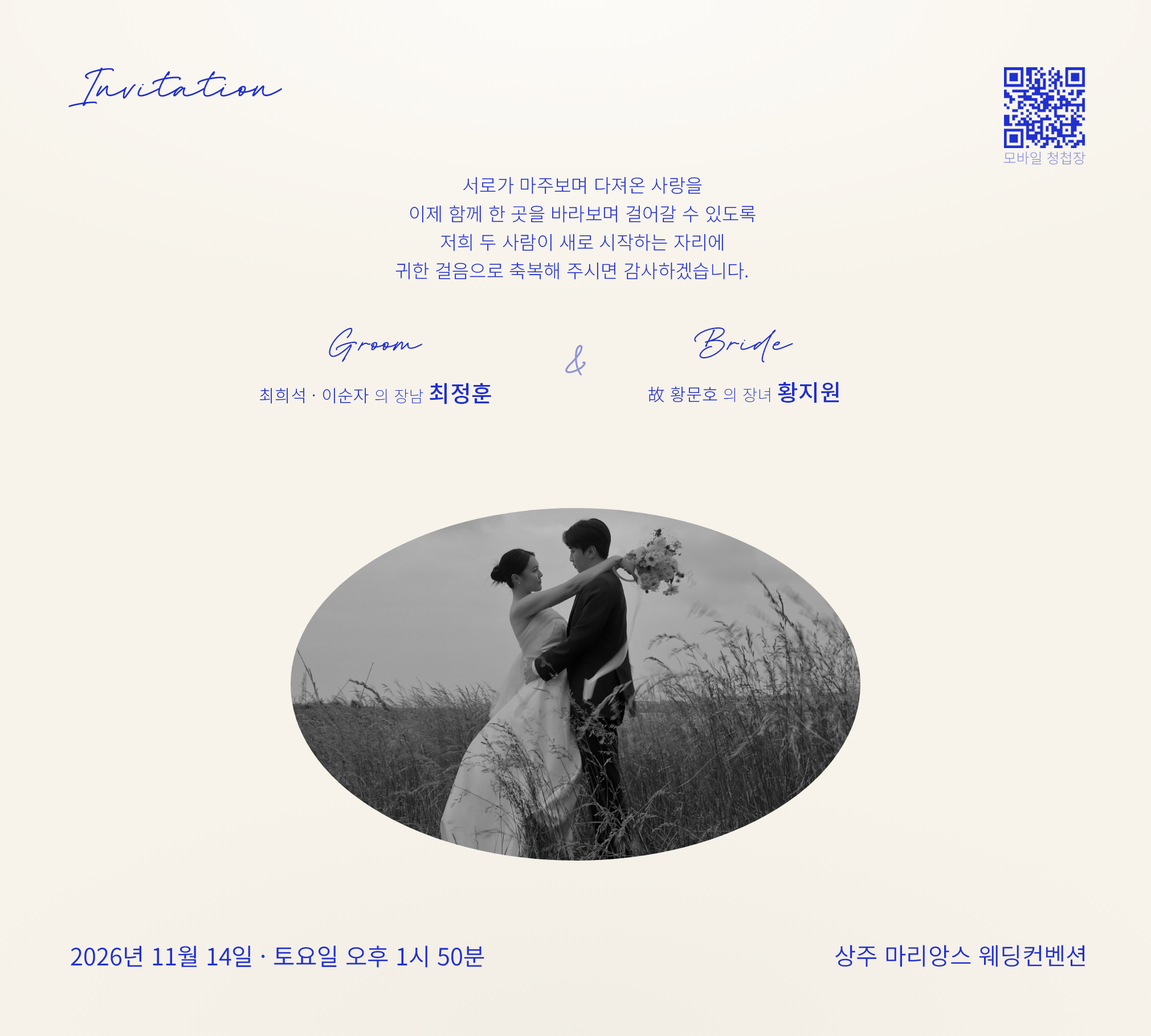
<style>
.page{position:relative;width:1151px;height:1036px;background:#f7f3ea}
.page>*{position:absolute;margin:0}
.t1{font:44.3px "FestiganRegular";color:#2030d0}
.t2{font:14.2px "NotoSansKR-Light";color:#9093dc;font-weight:bold}
.t3{font:18.8px/28.5px "NotoSansKR-Light";color:#2030d0;font-weight:bold}
.t4{font:35.5px "FestiganRegular";color:#2030d0}
.t5{font:48.1px "BrittanySignatureRegular";color:#9092db}
.t6{font:17.2px "NotoSansCJKkr-Light";letter-spacing:0.01em;color:#2030d0}
.t7{font:16.1px "NotoSansCJKkr-Thin";letter-spacing:0.01em;color:#2030d0}
.t8{font:22.9px "NotoSansCJKkr-Medium";letter-spacing:0.01em;color:#2030d0}
.t9{font:23px "NotoSansCJKkr-Medium";letter-spacing:0.01em;color:#2030d0}
.t10{font:23.7px "NotoSansKR-DemiLight";color:#2030d0}
</style>
<div class="page">
<p class="t1" style="left:68px;top:67px;width:214px;height:40px">Invitation</p>
<p class="t2" style="left:1003px;top:152px;width:82px;height:13px">모바일 청첩장</p>
<p class="t3" style="left:395px;top:177px;width:360px;height:103px;text-align:center">서로가 마주보며 다져온 사랑을<br>이제 함께 한 곳을 바라보며 걸어갈 수 있도록<br>저희 두 사람이 새로 시작하는 자리에<br>귀한 걸음으로 축복해 주시면 감사하겠습니다.</p>
<p class="t4" style="left:329px;top:328px;width:94px;height:34px">Groom</p>
<p class="t4" style="left:694px;top:327px;width:99px;height:36px">Bride</p>
<p class="t5" style="left:565px;top:345px;width:21px;height:30px">&amp;</p>
<p class="t6" style="left:260px;top:383px;width:231px;height:21px">최희석 · 이순자 <span class="t7">의 장남 </span><span class="t8">최정훈</span></p>
<p class="t6" style="left:648px;top:382px;width:191px;height:21px">故 황문호 <span class="t7">의 장녀 </span><span class="t9">황지원</span></p>
<p class="t10" style="left:71px;top:946px;width:413px;height:22px">2026년 11월 14일 · 토요일 오후 1시 50분</p>
<p class="t10" style="left:835px;top:945px;width:250px;height:22px">상주 마리앙스 웨딩컨벤션</p>
</div>
